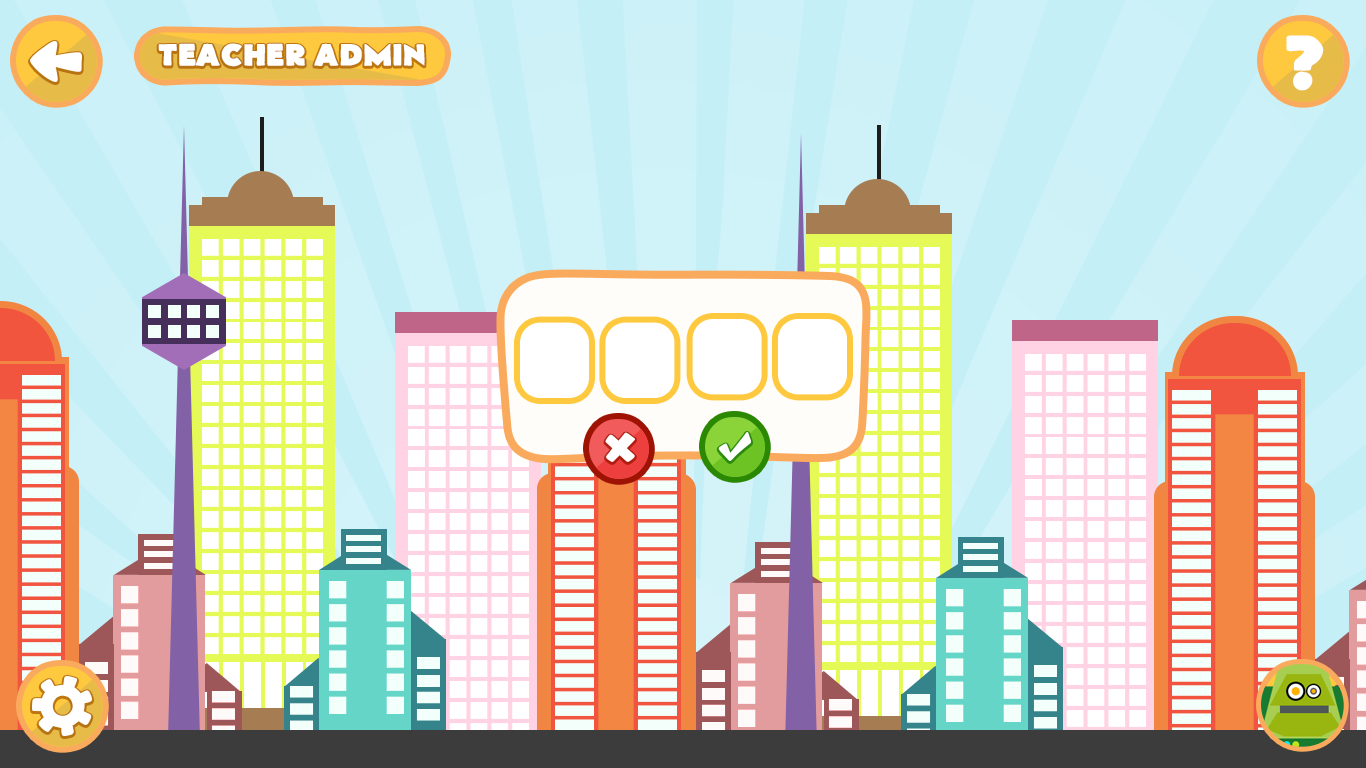
<style>
.page{position:relative;width:1366px;height:768px}
.page>*{position:absolute;margin:0}
.t1{font:30px "FlatBread";color:#ffffff}
</style>
<div class="page">
<p class="t1" style="left:158px;top:43px;width:267px;height:24px">Teacher Admin</p>
</div>
